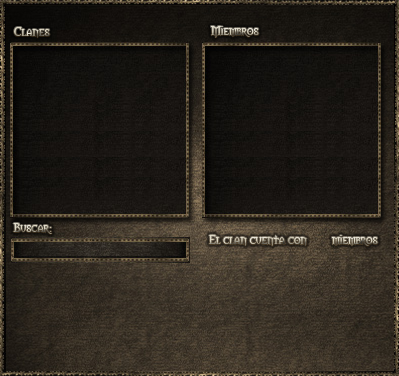
<style>
.page{position:relative;width:399px;height:376px}
.page>*{position:absolute;margin:0}
.t1{font:12px "Morpheus"}
</style>
<div class="page">
<p class="t1" style="left:14px;top:27px;width:36px;height:11px">Clanes</p>
<p class="t1" style="left:211px;top:26px;width:48px;height:12px">Miembros</p>
<p class="t1" style="left:13px;top:223px;width:39px;height:11px">Buscar:</p>
<p class="t1" style="left:209px;top:235px;width:169px;height:11px">El clan cuenta con         miembros</p>
</div>
